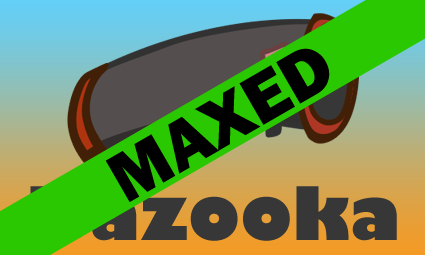
<style>
.page{position:relative;width:425px;height:255px}
.page>*{position:absolute;margin:0}
.t1{font:72px "FranklinGothic-Heavy";color:#000000}
.t2{font:72px "GillSans-UltraBold";color:#373737}
</style>
<div class="page">
<p class="t1" style="left:105px;top:48px;width:225px;height:154px;rotate:-30deg">MAXED</p>
<p class="t2" style="left:30px;top:186px;width:367px;height:55px">Bazooka</p>
</div>
